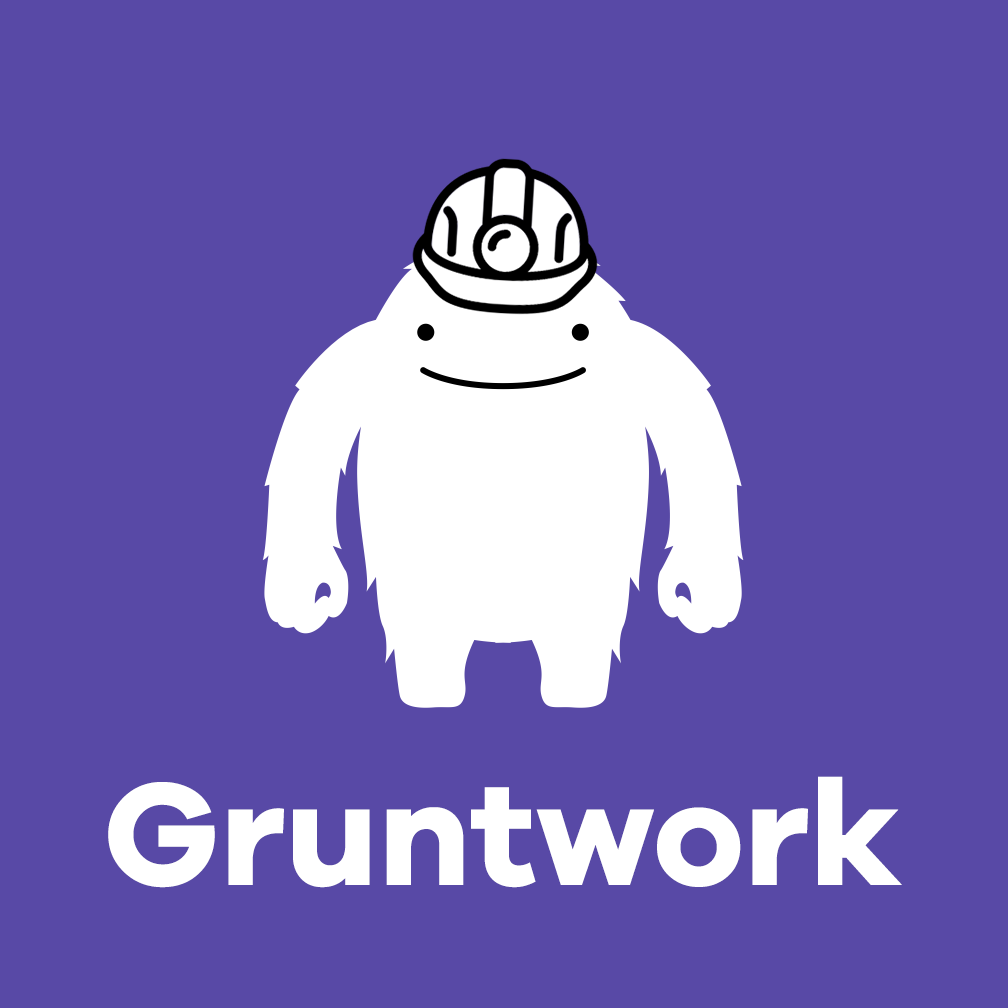
<style>
.page{position:relative;width:1008px;height:1008px;background:#5849a6}
.page>*{position:absolute;margin:0}
.t1{font:150px "GalanoGrotesque-Bold";color:#ffffff}
</style>
<div class="page">
<p class="t1" style="left:108px;top:776px;width:794px;height:112px">Gruntwork</p>
</div>
